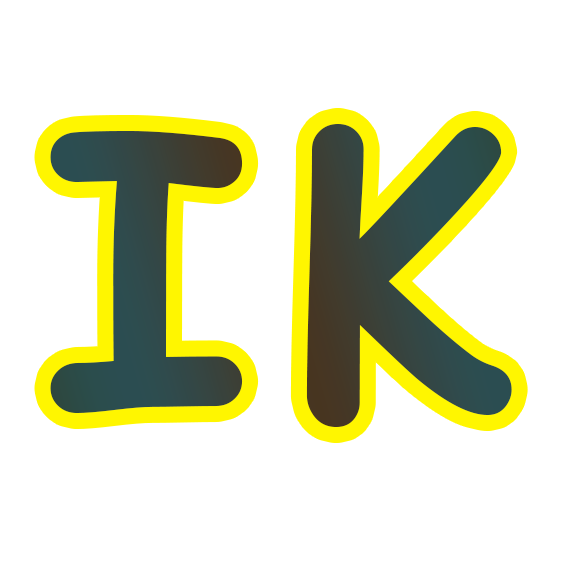
<style>
.page{position:relative;width:561px;height:561px;background:#ffffff}
.page>*{position:absolute;margin:0}
.t1{font:377.5px "ComicSansMS-Bold";letter-spacing:0.1em;color:#334745}
</style>
<div class="page">
<p class="t1" style="left:50px;top:124px;width:462px;height:303px">IK</p>
</div>
